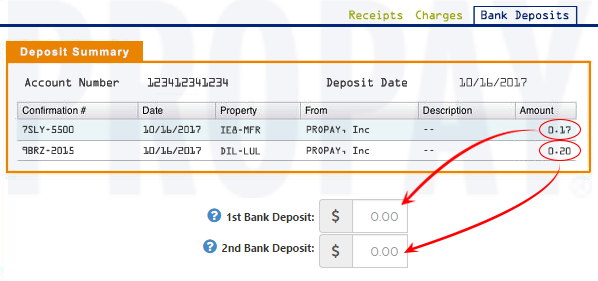
<style>
.page{position:relative;width:598px;height:281px;background:#ffffff}
.page>*{position:absolute;margin:0}
.t1{font:11px "OCRAStd";letter-spacing:-0.1em;color:#a2ad00}
.t2{font:11px "OCRAStd";letter-spacing:-0.1em;color:#002776}
.t3{font:11px "Arial-BoldMT";letter-spacing:0.1em;color:#eaf5f8}
.t4{font:11px "OCRAStd";letter-spacing:-0.1em;color:#3a3a3a}
.t5{font:9px "OCRAStd";letter-spacing:-0.075em;color:#3a3a3a}
</style>
<div class="page">
<p class="t1" style="left:349px;top:10px;width:54px;height:12px">Receipts</p>
<p class="t1" style="left:415px;top:10px;width:48px;height:12px">Charges</p>
<p class="t2" style="left:481px;top:10px;width:88px;height:12px">Bank Deposits</p>
<p class="t3" style="left:20px;top:47px;width:109px;height:11px">Deposit Summary</p>
<p class="t4" style="left:25px;top:78px;width:94px;height:9px">Account Number</p>
<p class="t4" style="left:25px;top:78px;width:94px;height:9px">Account Number</p>
<p class="t4" style="left:147px;top:78px;width:81px;height:9px">123412341234</p>
<p class="t4" style="left:147px;top:78px;width:81px;height:9px">123412341234</p>
<p class="t4" style="left:326px;top:78px;width:81px;height:11px">Deposit Date</p>
<p class="t4" style="left:326px;top:78px;width:81px;height:11px">Deposit Date</p>
<p class="t4" style="left:459px;top:78px;width:68px;height:9px">10/16/2017</p>
<p class="t5" style="left:22px;top:125px;width:52px;height:8px">7SLY-5500</p>
<p class="t5" style="left:143px;top:125px;width:58px;height:8px">10/16/2017</p>
<p class="t5" style="left:220px;top:126px;width:41px;height:8px">IE8-MFR</p>
<p class="t5" style="left:306px;top:125px;width:64px;height:8px">PROPAY, Inc</p>
<p class="t5" style="left:548px;top:126px;width:23px;height:8px">0.17</p>
<p class="t5" style="left:424px;top:129px;width:10px;height:1px">--</p>
<p class="t5" style="left:22px;top:146px;width:52px;height:8px">9BRZ-2015</p>
<p class="t5" style="left:143px;top:147px;width:58px;height:7px">10/16/2017</p>
<p class="t5" style="left:220px;top:147px;width:41px;height:8px">DIL-LUL</p>
<p class="t5" style="left:306px;top:146px;width:64px;height:8px">PROPAY, Inc</p>
<p class="t5" style="left:424px;top:150px;width:10px;height:1px">--</p>
<p class="t5" style="left:548px;top:147px;width:23px;height:8px">0.20</p>
</div>
